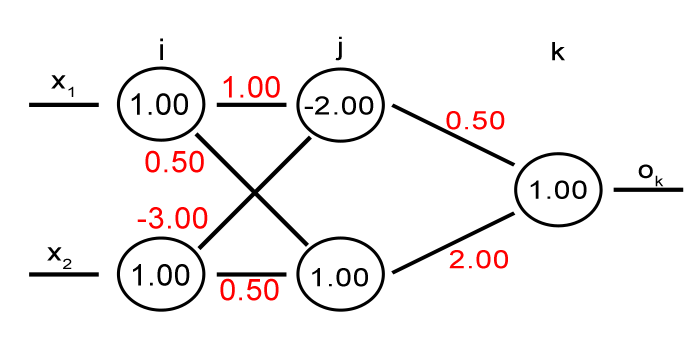
<style>
.page{position:relative;width:700px;height:350px;background:#ffffff}
.page>*{position:absolute;margin:0}
.t1{font:30px "ArialMT";letter-spacing:0.025em;color:#000000}
.t2{font:25.3px "ArialMT";letter-spacing:0.025em;color:#000000;scale:1.18 1}
.t3{font:30px "ArialMT";letter-spacing:0.025em;color:#ff0000}
.t4{font:25.3px "ArialMT";letter-spacing:0.025em;color:#ff0000;scale:1.18 1}
</style>
<div class="page">
<p class="t1" style="left:160px;top:38px;width:3px;height:22px">i</p>
<p class="t2" style="left:335px;top:36px;width:7px;height:25px">j</p>
<p class="t2" style="left:552px;top:42px;width:13px;height:19px">k</p>
<p class="t2" style="left:51px;top:75px;width:23px;height:22px">x1</p>
<p class="t3" style="left:223px;top:76px;width:57px;height:22px">1.00</p>
<p class="t1" style="left:131px;top:93px;width:57px;height:22px">1.00</p>
<p class="t2" style="left:304px;top:96px;width:70px;height:19px">-2.00</p>
<p class="t4" style="left:446px;top:111px;width:59px;height:19px">0.50</p>
<p class="t3" style="left:145px;top:150px;width:59px;height:23px">0.50</p>
<p class="t2" style="left:638px;top:164px;width:26px;height:23px">ok</p>
<p class="t2" style="left:530px;top:180px;width:57px;height:19px">1.00</p>
<p class="t3" style="left:137px;top:207px;width:71px;height:22px">-3.00</p>
<p class="t2" style="left:47px;top:247px;width:25px;height:22px">x2</p>
<p class="t4" style="left:449px;top:250px;width:59px;height:19px">2.00</p>
<p class="t1" style="left:133px;top:264px;width:57px;height:22px">1.00</p>
<p class="t2" style="left:312px;top:268px;width:56px;height:19px">1.00</p>
<p class="t3" style="left:220px;top:278px;width:59px;height:23px">0.50</p>
</div>
